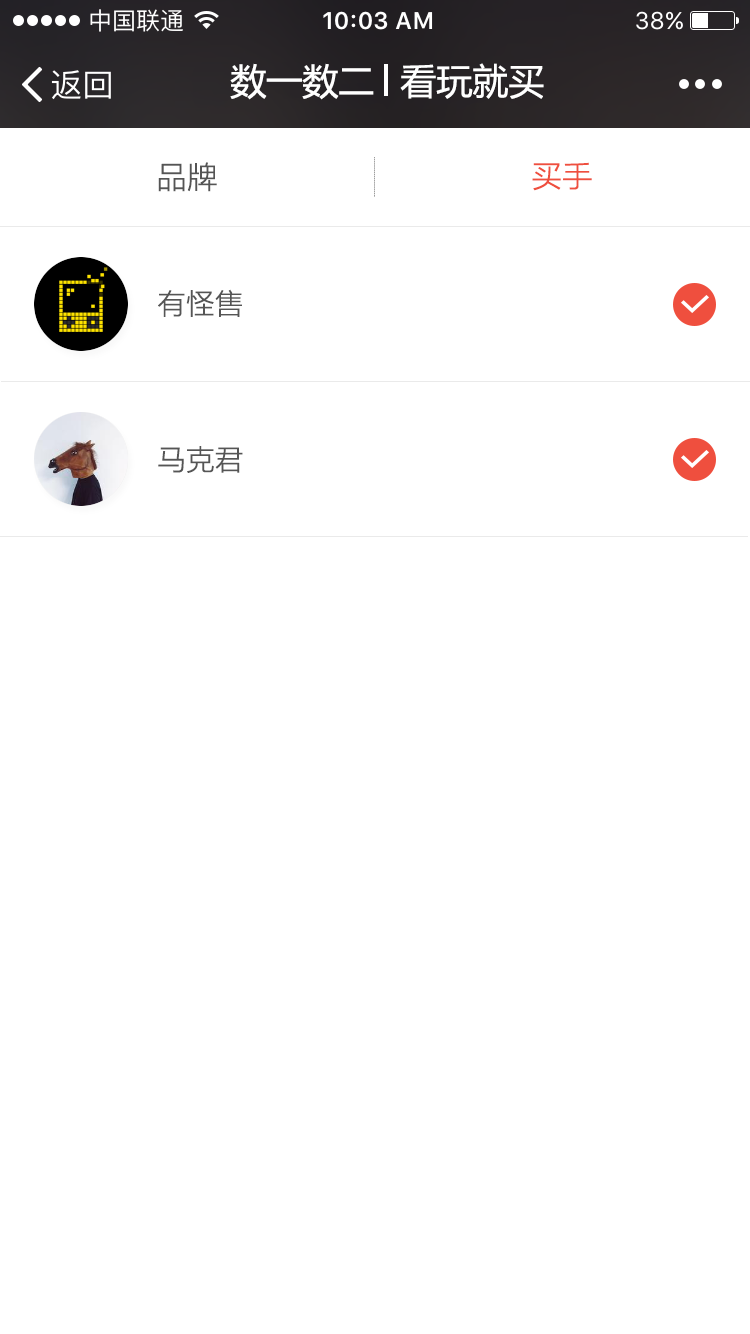
<style>
.page{position:relative;width:750px;height:1334px;background:#ffffff}
.page>*{position:absolute;margin:0}
.t1{font:36px "MicrosoftYaHei";color:#ffffff}
.t2{font:30px "MicrosoftYaHeiLight";color:#555555;font-weight:bold}
.t3{font:30px "MicrosoftYaHeiLight";color:#ef4f3e;font-weight:bold}
.t4{font:28px "MicrosoftYaHeiLight";color:#555555;font-weight:bold}
</style>
<div class="page">
<p class="t1" style="left:230px;top:63px;width:144px;height:37px">数一数二</p>
<p class="t1" style="left:400px;top:63px;width:144px;height:36px">看玩就买</p>
<p class="t2" style="left:158px;top:162px;width:59px;height:30px">品牌</p>
<p class="t3" style="left:532px;top:162px;width:60px;height:29px">买手</p>
<p class="t4" style="left:158px;top:289px;width:84px;height:28px">有怪售</p>
<p class="t4" style="left:158px;top:446px;width:85px;height:27px">马克君</p>
</div>
